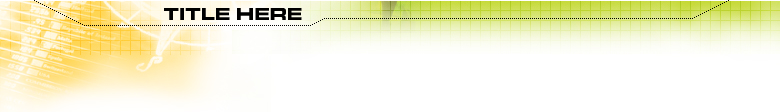
<style>
.page{position:relative;width:780px;height:112px;background:#ffffff}
.page>*{position:absolute;margin:0}
.t1{font:18px "MicrogrammaD-BoldExte";letter-spacing:0.05em;color:#000000}
</style>
<div class="page">
<p class="t1" style="left:164px;top:8px;width:138px;height:12px">TITLE HERE</p>
</div>
